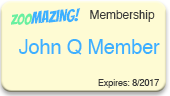
<style>
.page{position:relative;width:170px;height:96px;background:#fefbd3}
.page>*{position:absolute;margin:0}
.t1{font:16.8px "Bangers-Regular";letter-spacing:-0.01em;color:#3db1ff}
.t2{font:14.7px "Bangers-Regular";letter-spacing:-0.01em;color:#69f0a1}
.t3{font:9px "Helvetica";letter-spacing:-0.01em;color:#3a3a3a}
.t4{font:12px "Helvetica";letter-spacing:-0.01em;color:#3a3a3a}
.t5{font:20px "Helvetica";letter-spacing:-0.01em;color:#3db1ff}
</style>
<div class="page">
<p class="t1" style="left:11px;top:8px;width:70px;height:17px;rotate:-4deg"><span class="t2">ZOO</span>MAZING!</p>
<p class="t3" style="left:19px;top:10px;width:141px;height:78px;text-align:right"><span class="t4">Membership<br><br></span><span class="t5">John Q Member<br><br><br></span>Expires: 8/2017</p>
</div>
